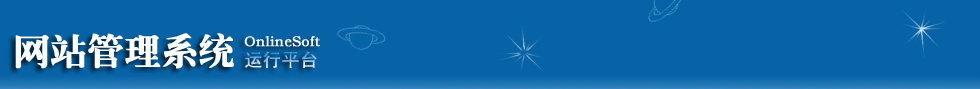
<style>
.page{position:relative;width:980px;height:89px;background:#0763a6}
.page>*{position:absolute;margin:0}
.t1{font:36px "JQLaoSongJT";color:#fefefe;font-weight:bold}
.t2{font:14px "STZhongsong";color:#fefefe;font-weight:bold}
.t3{font:18px "SimHei";font-weight:bold}
</style>
<div class="page">
<p class="t1" style="left:15px;top:33px;width:219px;height:36px">网站管理系统</p>
<p class="t2" style="left:244px;top:36px;width:76px;height:11px">OnlineSoft</p>
<p class="t3" style="left:244px;top:51px;width:73px;height:17px">运行平台</p>
</div>
